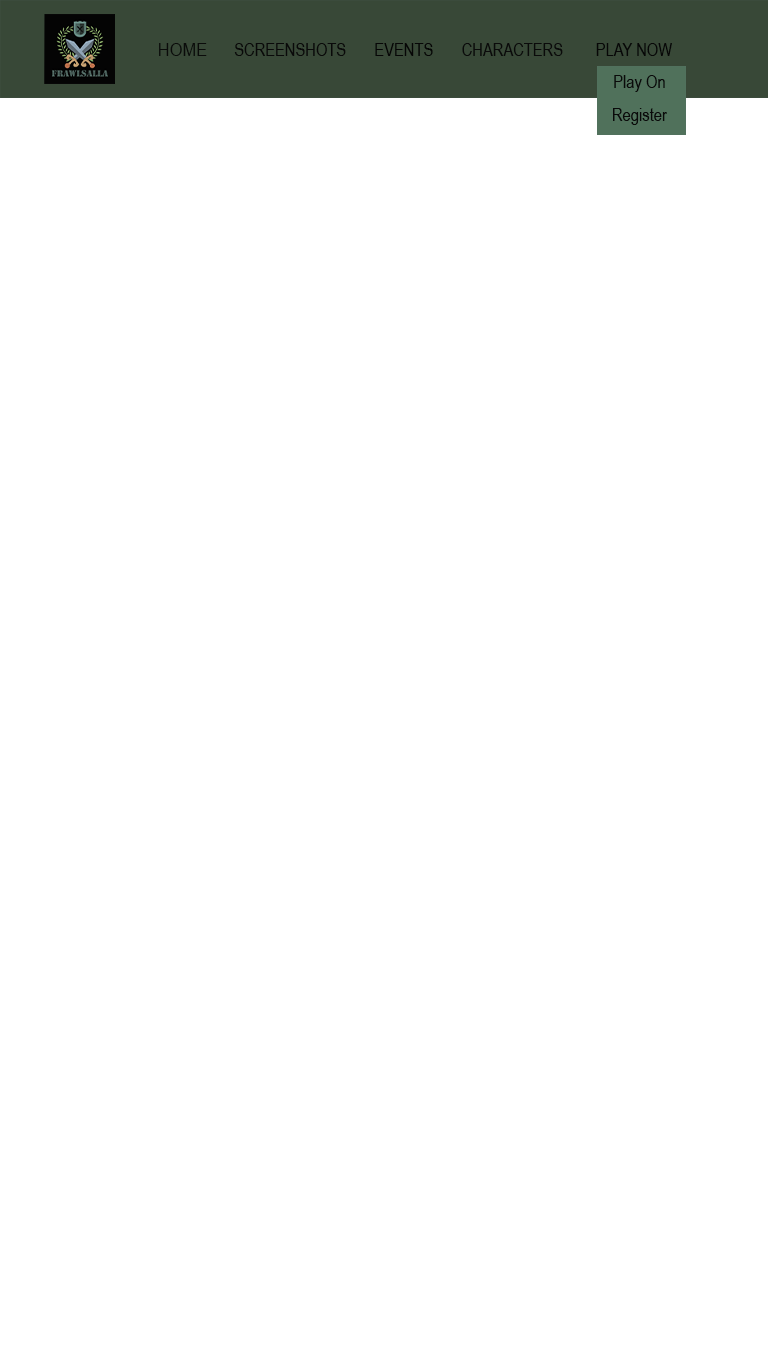
<style>
.page{position:relative;width:768px;height:1366px;background:#ffffff}
.page>*{position:absolute;margin:0}
.t1{font:17.9px "ArialNarrow";color:#0a0b0a;scale:1.13 1}
.t2{font:17.9px "ArialNarrow";color:#090909}
.t3{font:17.9px "ArialNarrow";color:#060606}
.t4{font:17.9px "ArialNarrow";color:#0a0a0a}
.t5{font:17.9px "ArialNarrow";color:#070707}
.t6{font:18px "ArialNarrow";color:#0a0a0a}
</style>
<div class="page">
<p class="t1" style="left:159px;top:43px;width:48px;height:13px">HOME</p>
<p class="t2" style="left:234px;top:43px;width:112px;height:13px">SCREENSHOTS</p>
<p class="t3" style="left:375px;top:43px;width:58px;height:13px">EVENTS</p>
<p class="t4" style="left:462px;top:43px;width:101px;height:13px">CHARACTERS</p>
<p class="t5" style="left:596px;top:43px;width:76px;height:13px">PLAY NOW</p>
<p class="t6" style="left:614px;top:75px;width:51px;height:17px">Play On</p>
<p class="t6" style="left:613px;top:108px;width:54px;height:17px">Register</p>
</div>
